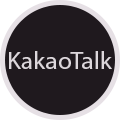
<style>
.page{position:relative;width:120px;height:120px;background:#1f191e}
.page>*{position:absolute;margin:0}
.t1{font:24.8px "MyriadPro-Regular";color:#ddd7dc}
</style>
<div class="page">
<p class="t1" style="left:9px;top:51px;width:103px;height:18px">KakaoTalk</p>
</div>
